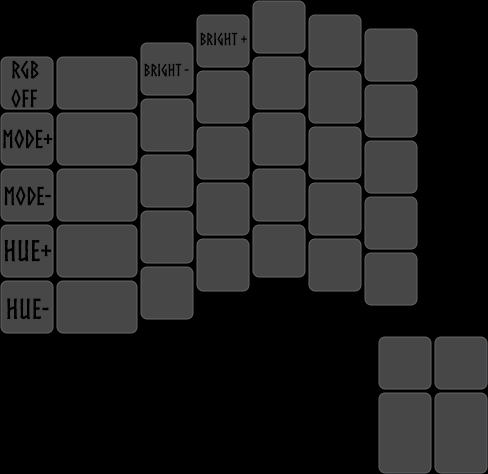
<style>
.page{position:relative;width:488px;height:474px;background:#000000}
.page>*{position:absolute;margin:0}
.t1{font:17px "Norse-Bold";color:#000000}
.t2{font:24px "Norse-Bold";color:#000000}
.t3{font:25px "Norse-Bold";color:#000000}
.t4{font:29px "Norse-Bold";color:#000000}
.t5{font:28px "Norse-Bold";color:#000000}
</style>
<div class="page">
<p class="t1" style="left:200px;top:32px;width:47px;height:14px">Bright +</p>
<p class="t2" style="left:11px;top:60px;width:28px;height:48px;text-align:center">RGB<br>Off</p>
<p class="t1" style="left:144px;top:63px;width:45px;height:14px">Bright -</p>
<p class="t3" style="left:3px;top:129px;width:50px;height:20px">Mode+</p>
<p class="t3" style="left:4px;top:186px;width:47px;height:20px">Mode-</p>
<p class="t4" style="left:4px;top:239px;width:47px;height:23px">Hue+</p>
<p class="t5" style="left:7px;top:298px;width:42px;height:22px">HuE-</p>
</div>
